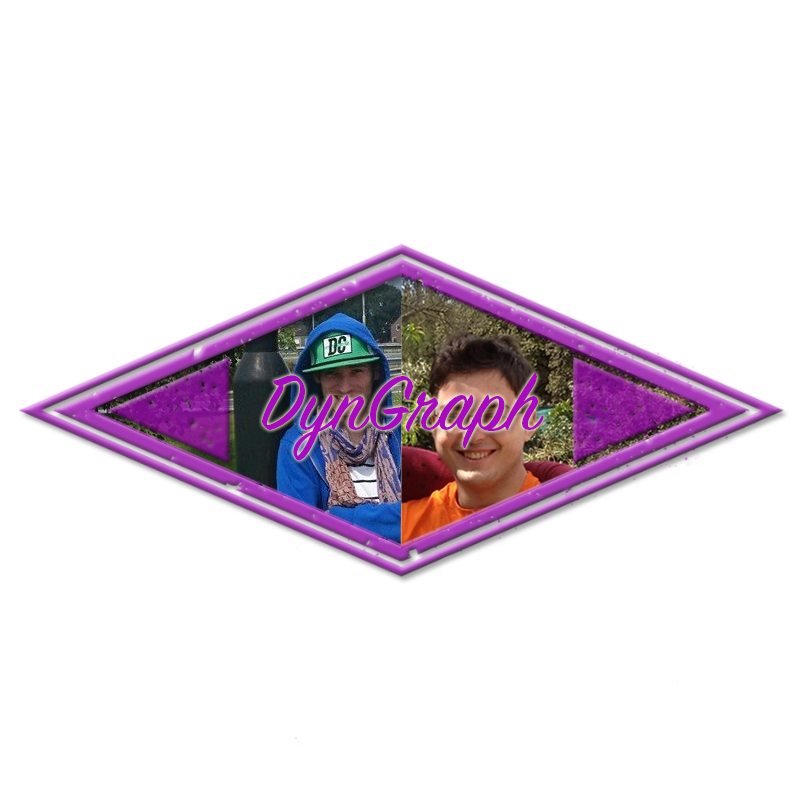
<style>
.page{position:relative;width:800px;height:800px;background:#ffffff}
.page>*{position:absolute;margin:0}
.t1{font:86px "SignPainter-HouseScript";color:#a80abf}
</style>
<div class="page">
<p class="t1" style="left:262px;top:372px;width:282px;height:89px">DynGraph</p>
</div>
